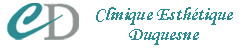
<style>
.page{position:relative;width:240px;height:50px;background:#ffffff}
.page>*{position:absolute;margin:0}
.t1{font:18.8px/19.7px "MonotypeCorsiva";color:#298c92;scale:1.06 1}
</style>
<div class="page">
<p class="t1" style="left:96px;top:7px;width:137px;height:38px;text-align:center">Clinique Esthétique Duquesne</p>
</div>
